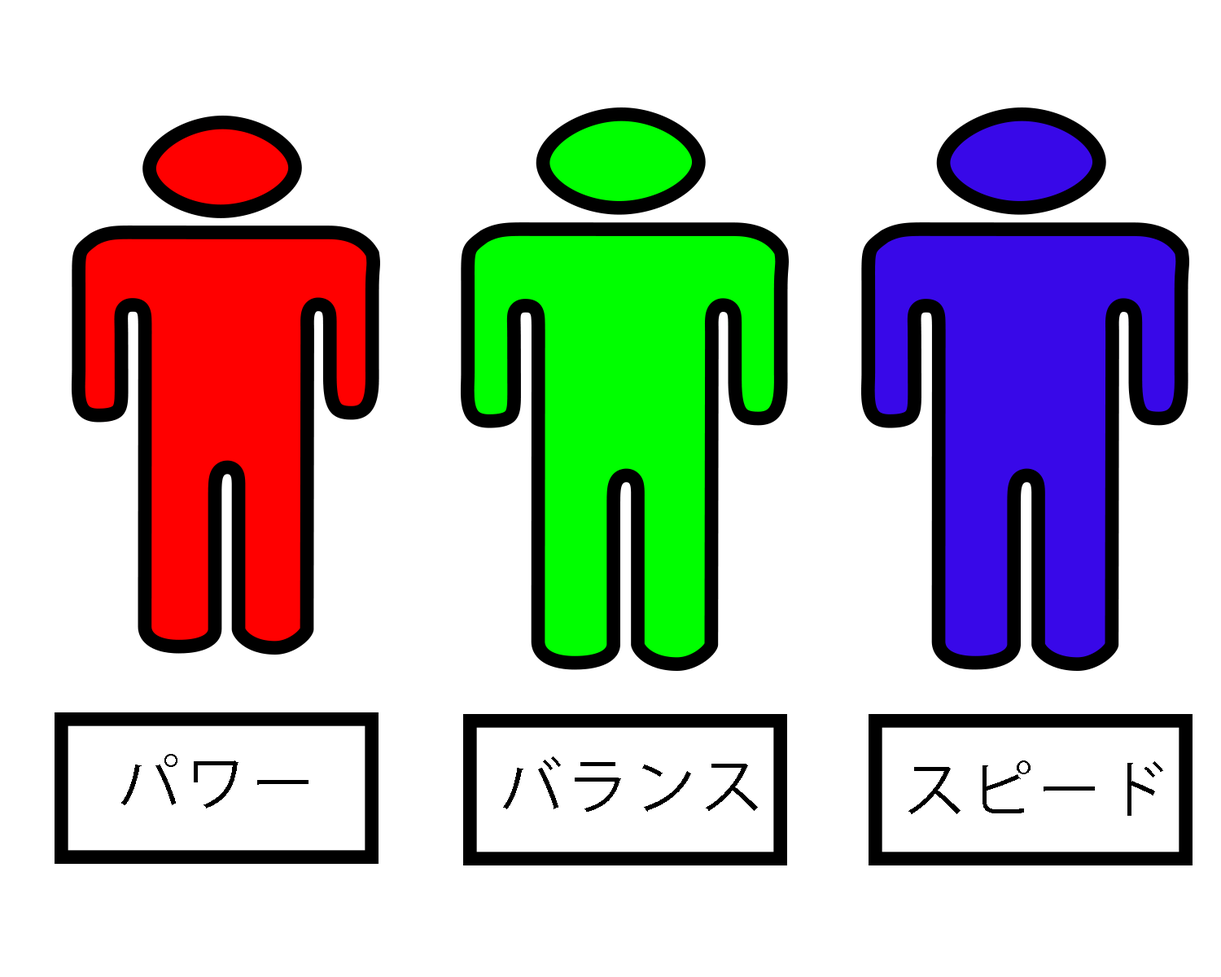
<style>
.page{position:relative;width:1221px;height:977px;background:#ffffff}
.page>*{position:absolute;margin:0}
.t1{font:61px "KozGoPr6N-Regular";letter-spacing:0.1em;color:#000000}
</style>
<div class="page">
<p class="t1" style="left:121px;top:754px;width:187px;height:54px">パワー</p>
<p class="t1" style="left:503px;top:756px;width:255px;height:55px">バランス</p>
<p class="t1" style="left:908px;top:760px;width:255px;height:56px">スピード</p>
</div>
